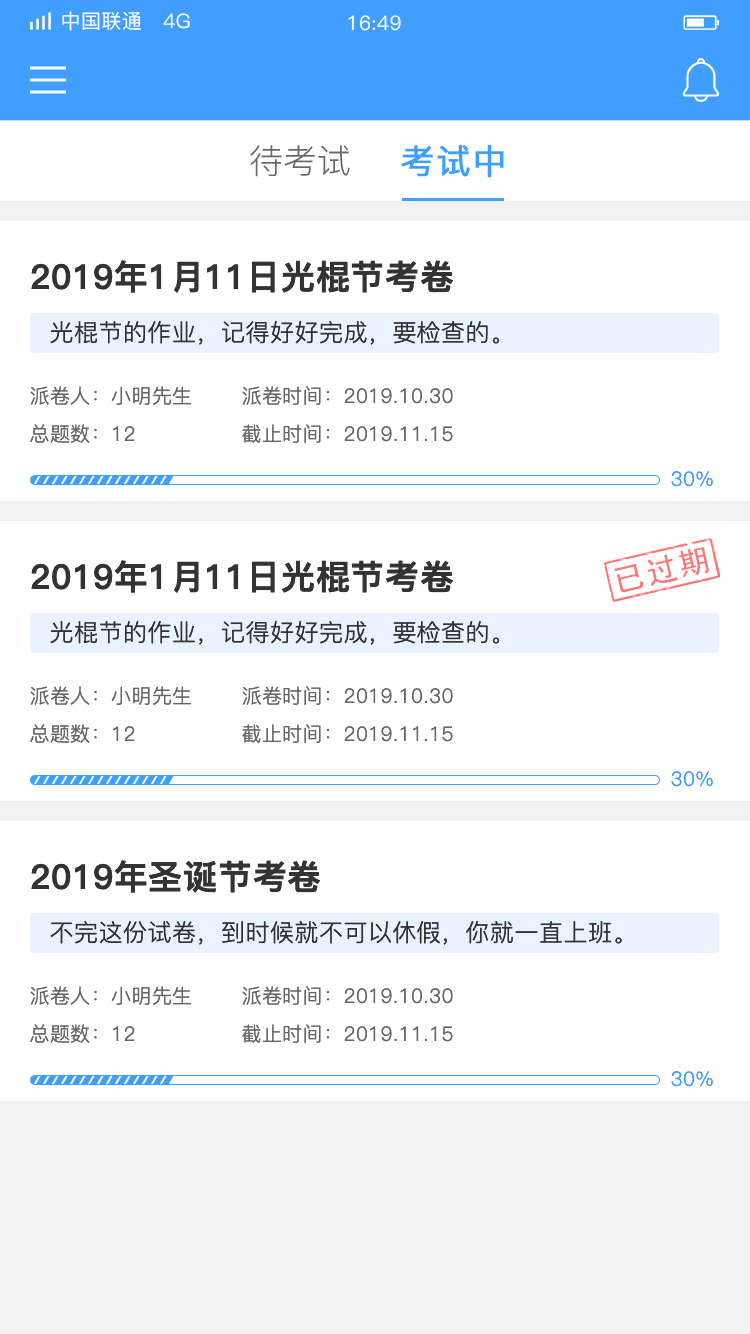
<style>
.page{position:relative;width:750px;height:1334px;background:#ffffff}
.page>*{position:absolute;margin:0}
.t1{font:20px "PingFang-SC-Medium";letter-spacing:0.02em;color:#ffffff}
.t2{font:34px "PingFang-SC-Regular";color:#666666}
.t3{font:34px "PingFang-SC-Medium";letter-spacing:0.02em;color:#409eff;font-weight:bold}
.t4{font:34px "PingFang-SC-Heavy";letter-spacing:0.02em;color:#333333}
.t5{font:24px "PingFang-SC-Regular";letter-spacing:0.02em;color:#333333}
.t6{font:20px "PingFang-SC-Regular";letter-spacing:0.02em;color:#666666}
.t7{font:20px "PingFang-SC-Regular";letter-spacing:0.02em;color:#409eff}
</style>
<div class="page">
<p class="t1" style="left:62px;top:11px;width:128px;height:20px">中国联通   4G</p>
<p class="t1" style="left:348px;top:15px;width:53px;height:16px">16:49</p>
<p class="t2" style="left:250px;top:145px;width:100px;height:32px">待考试</p>
<p class="t3" style="left:401px;top:145px;width:103px;height:33px">考试中</p>
<p class="t4" style="left:31px;top:260px;width:422px;height:33px">2019年1月11日光棍节考卷</p>
<p class="t5" style="left:50px;top:320px;width:450px;height:25px">光棍节的作业，记得好好完成，要检查的。</p>
<p class="t6" style="left:30px;top:386px;width:161px;height:19px">派卷人：小明先生</p>
<p class="t6" style="left:242px;top:386px;width:211px;height:19px">派卷时间：2019.10.30</p>
<p class="t6" style="left:30px;top:424px;width:105px;height:19px">总题数：12</p>
<p class="t6" style="left:242px;top:424px;width:211px;height:19px">截止时间：2019.11.15</p>
<p class="t7" style="left:671px;top:471px;width:42px;height:16px">30%</p>
<p class="t4" style="left:31px;top:560px;width:422px;height:33px">2019年1月11日光棍节考卷</p>
<p class="t5" style="left:50px;top:620px;width:450px;height:25px">光棍节的作业，记得好好完成，要检查的。</p>
<p class="t6" style="left:30px;top:686px;width:161px;height:19px">派卷人：小明先生</p>
<p class="t6" style="left:242px;top:686px;width:211px;height:19px">派卷时间：2019.10.30</p>
<p class="t6" style="left:30px;top:724px;width:105px;height:19px">总题数：12</p>
<p class="t6" style="left:242px;top:724px;width:211px;height:19px">截止时间：2019.11.15</p>
<p class="t7" style="left:671px;top:771px;width:42px;height:16px">30%</p>
<p class="t4" style="left:31px;top:860px;width:289px;height:33px">2019年圣诞节考卷</p>
<p class="t5" style="left:50px;top:921px;width:572px;height:24px">不完这份试卷，到时候就不可以休假，你就一直上班。</p>
<p class="t6" style="left:30px;top:986px;width:161px;height:19px">派卷人：小明先生</p>
<p class="t6" style="left:242px;top:986px;width:211px;height:19px">派卷时间：2019.10.30</p>
<p class="t6" style="left:30px;top:1024px;width:105px;height:19px">总题数：12</p>
<p class="t6" style="left:242px;top:1024px;width:211px;height:19px">截止时间：2019.11.15</p>
<p class="t7" style="left:671px;top:1071px;width:42px;height:16px">30%</p>
</div>
